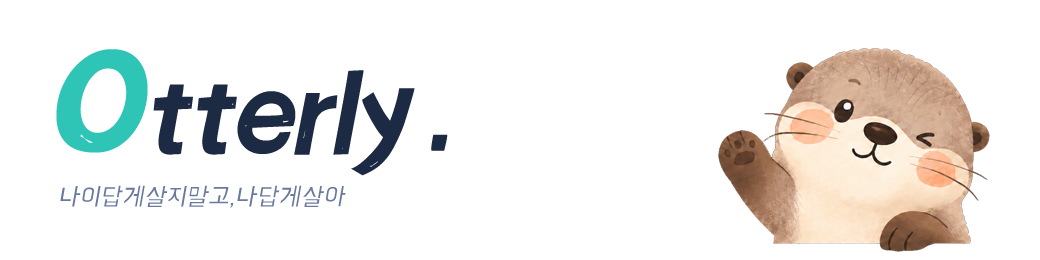
<style>
.page{position:relative;width:1040px;height:260px;background:#ffffff}
.page>*{position:absolute;margin:0}
.t1{font:113.2px "huangyuchenzhuohei-Regular";letter-spacing:-0.01em;color:#1d2a44;font-style:italic}
.t2{font:147px "huangyuchenzhuohei-Regular";letter-spacing:-0.01em;color:#2ec4b6;font-style:italic}
.t3{font:26.3px "BMHANNAAirOTF";color:#6a7a9d;font-style:italic}
</style>
<div class="page">
<p class="t1" style="left:56px;top:49px;width:392px;height:127px"><span class="t2">O</span>tterly.</p>
<p class="t3" style="left:60px;top:185px;width:286px;height:23px">나이답게살지말고,나답게살아</p>
</div>
